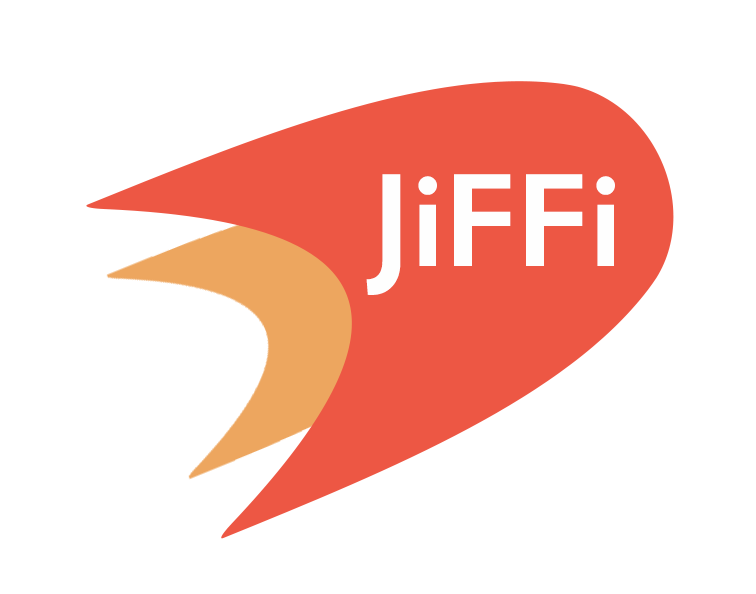
<style>
.page{position:relative;width:756px;height:594px;background:#ffffff}
.page>*{position:absolute;margin:0}
.t1{font:134.3px "GillSans-SemiBold";color:#fefefe}
</style>
<div class="page">
<p class="t1" style="left:366px;top:174px;width:249px;height:121px">JiFFi</p>
</div>
